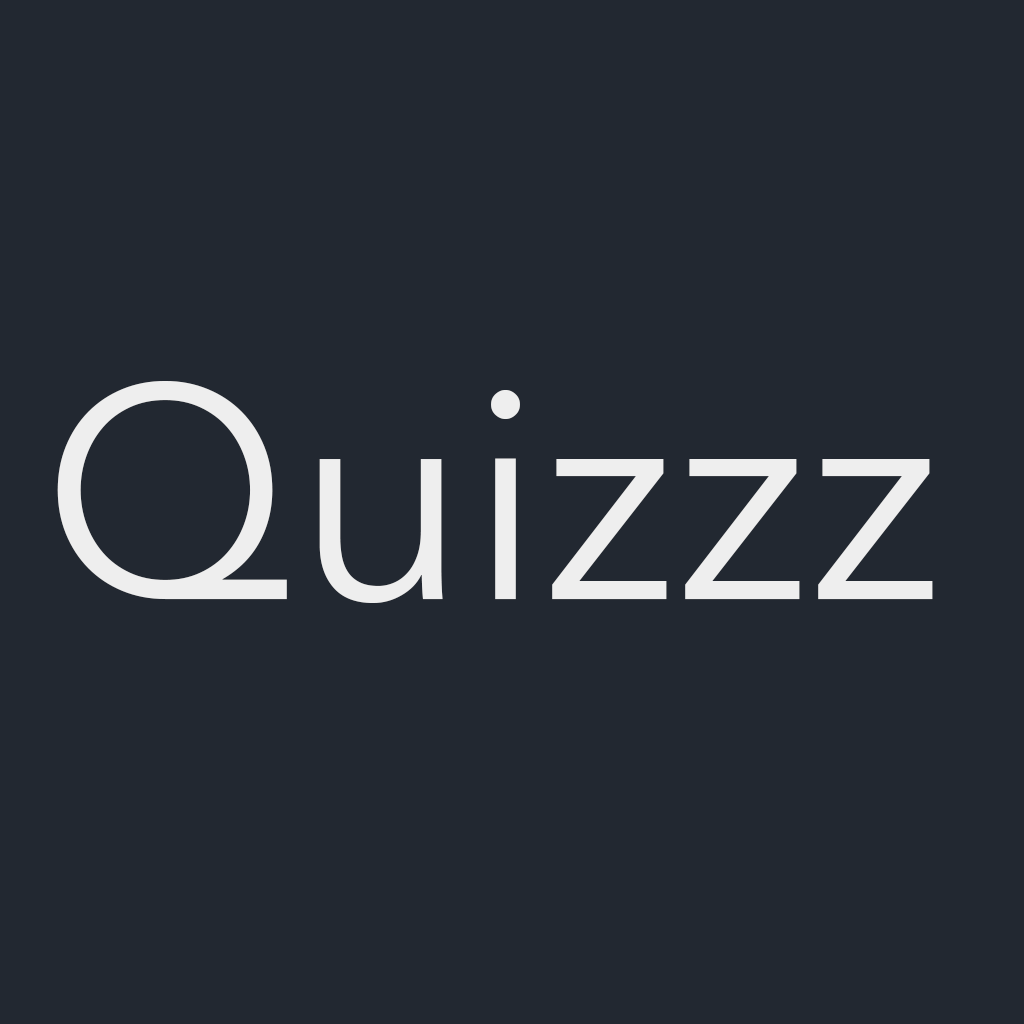
<style>
.page{position:relative;width:1024px;height:1024px;background:#222831}
.page>*{position:absolute;margin:0}
.t1{font:300px "AvenirNext-Regular";color:#eeeeee}
</style>
<div class="page">
<p class="t1" style="left:57px;top:381px;width:876px;height:222px">Quizzz</p>
</div>
